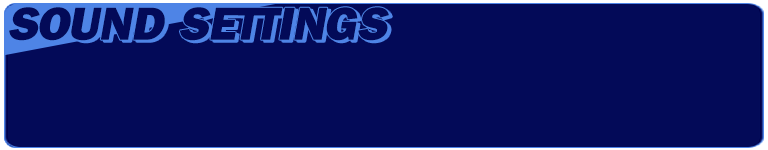
<style>
.page{position:relative;width:768px;height:150px;background:#030a58}
.page>*{position:absolute;margin:0}
.t1{font:48px "FranklinGothic-Heavy";letter-spacing:0.05em;color:#030a58;font-style:italic}
</style>
<div class="page">
<p class="t1" style="left:9px;top:7px;width:380px;height:34px">SOUND SETTINGS</p>
</div>
